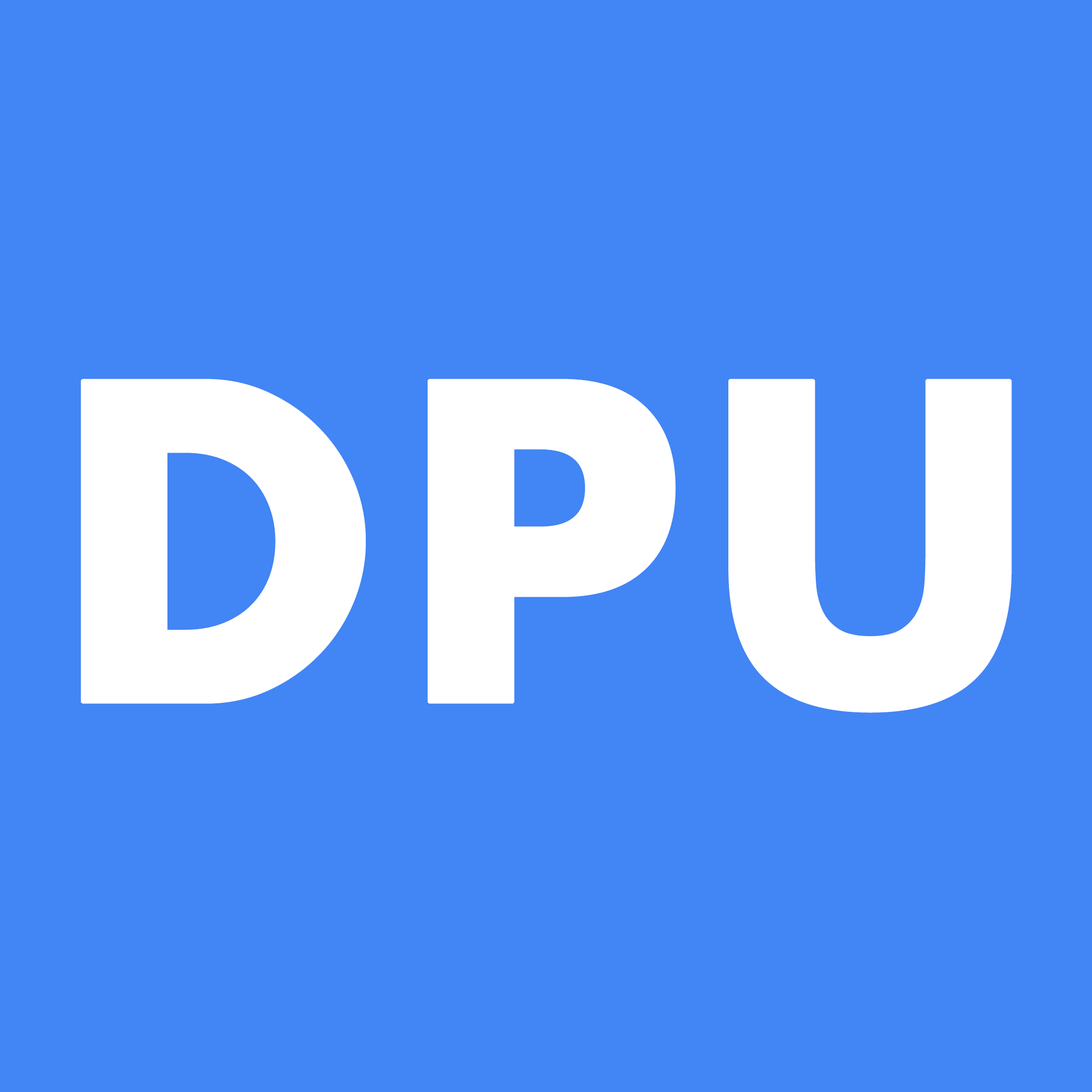
<style>
.page{position:relative;width:1092px;height:1092px;background:#4285f4}
.page>*{position:absolute;margin:0}
.t1{font:426.6px "Futura-Bold";color:#ffffff;font-weight:bold}
</style>
<div class="page">
<p class="t1" style="left:81px;top:379px;width:931px;height:334px">DPU</p>
</div>
